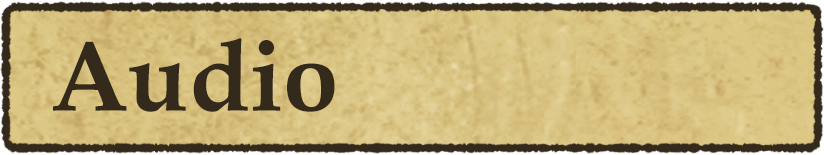
<style>
.page{position:relative;width:824px;height:155px}
.page>*{position:absolute;margin:0}
.t1{font:100px "BookAntiqua-Bold";color:#332a1c}
</style>
<div class="page">
<p class="t1" style="left:53px;top:38px;width:282px;height:74px">Audio</p>
</div>
